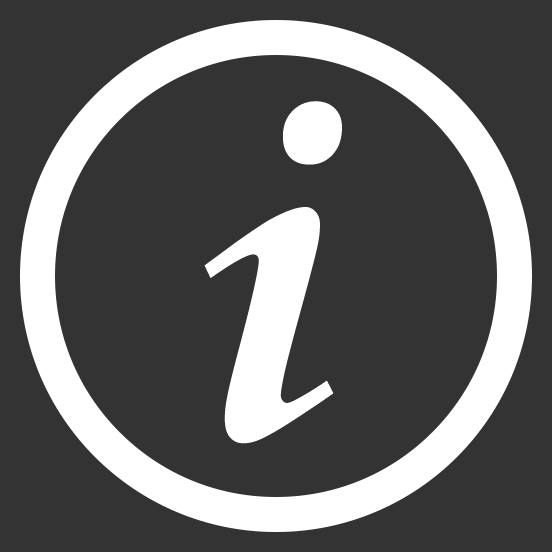
<style>
.page{position:relative;width:552px;height:552px;background:#333333}
.page>*{position:absolute;margin:0}
.t1{font:480px "Palatino-BoldItalic";color:#ffffff}
</style>
<div class="page">
<p class="t1" style="left:204px;top:101px;width:138px;height:343px">i</p>
</div>
